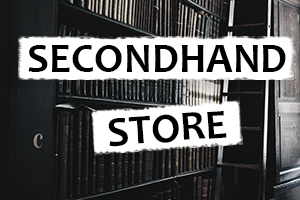
<style>
.page{position:relative;width:300px;height:200px}
.page>*{position:absolute;margin:0}
.t1{font:42px "Candara-Bold";color:#000000}
</style>
<div class="page">
<p class="t1" style="left:28px;top:45px;width:258px;height:27px">SECONDHAND</p>
<p class="t1" style="left:108px;top:111px;width:119px;height:36px;rotate:-4deg">STORE</p>
</div>
